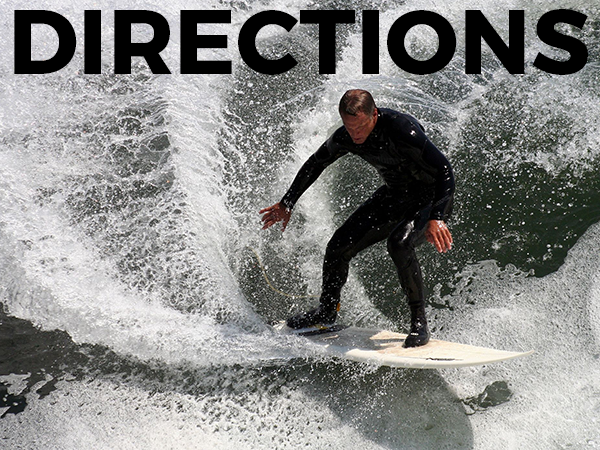
<style>
.page{position:relative;width:600px;height:450px}
.page>*{position:absolute;margin:0}
.t1{font:91.7px "Montserrat-Bold";color:#000000}
</style>
<div class="page">
<p class="t1" style="left:14px;top:9px;width:574px;height:66px">DIRECTIONS</p>
</div>
